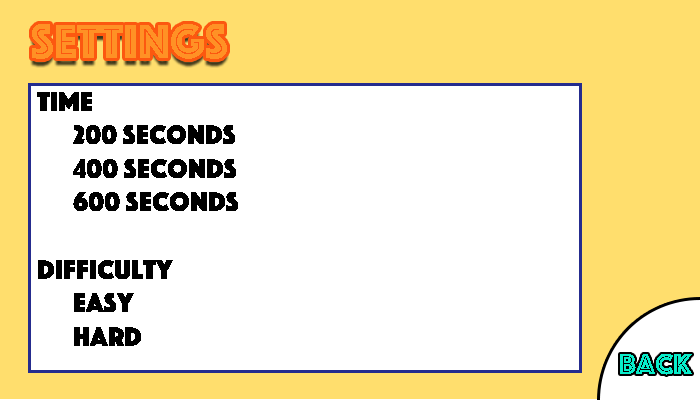
<style>
.page{position:relative;width:700px;height:400px;background:#ffffff}
.page>*{position:absolute;margin:0}
.t1{font:50px "Phosphate-Inline";color:#ff9125}
.t2{font:28px "Phosphate-Solid";color:#000000}
.t3{font:30px "Phosphate-Inline";color:#08edca}
</style>
<div class="page">
<p class="t1" style="left:32px;top:24px;width:195px;height:35px">Settings</p>
<p class="t2" style="left:37px;top:92px;width:201px;height:254px">Time<br> 200 seconds<br> 400 seconds<br> 600 seconds<br><br>Difficulty<br> Easy<br> Hard</p>
<p class="t3" style="left:620px;top:354px;width:72px;height:21px">Back</p>
</div>
